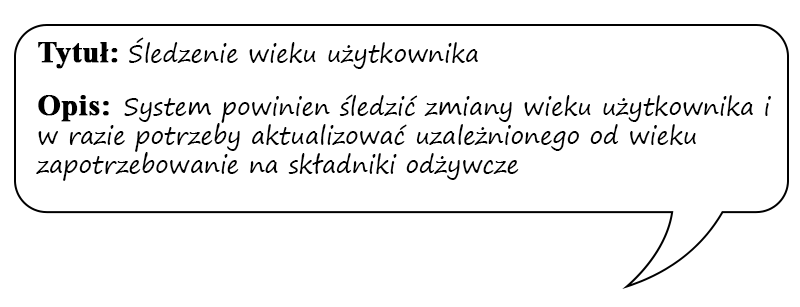
<style>
.page{position:relative;width:800px;height:307px;background:#ffffff}
.page>*{position:absolute;margin:0}
.t1{font:24px "SegoePrint";color:#000000}
.t2{font:30px "TimesNewRomanPS-BoldMT";color:#000000;font-weight:bold}
</style>
<div class="page">
<p class="t1" style="left:36px;top:37px;width:735px;height:144px"><span class="t2">Tytuł: </span>Śledzenie wieku użytkownika<br><br><span class="t2">Opis:  </span>System powinien śledzić zmiany wieku użytkownika i w razie potrzeby aktualizować uzależnionego od wieku zapotrzebowanie na składniki odżywcze</p>
</div>
